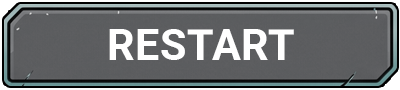
<style>
.page{position:relative;width:400px;height:90px}
.page>*{position:absolute;margin:0}
.t1{font:42.9px "Roboto-Bold";letter-spacing:-0.02em;color:#ffffff;text-transform:uppercase}
</style>
<div class="page">
<p class="t1" style="left:109px;top:29px;width:185px;height:31px">RESTART</p>
</div>
